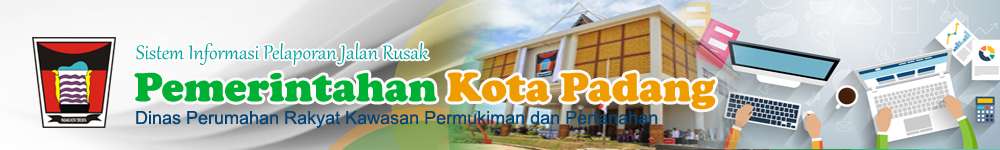
<style>
.page{position:relative;width:1000px;height:150px}
.page>*{position:absolute;margin:0}
.t1{font:24px "Gabriola";color:#00a49d}
.t2{font:42px "CooperBlack";color:#00b034}
.t3{font:42px "CooperBlack";color:#ef9c00}
.t4{font:18px "ArialMT";color:#044476}
</style>
<div class="page">
<p class="t1" style="left:136px;top:43px;width:293px;height:22px">Sistem Informasi Pelaporan Jalan Rusak</p>
<p class="t2" style="left:134px;top:72px;width:582px;height:38px">Pemerintahan <span class="t3">Kota Padang</span></p>
<p class="t4" style="left:136px;top:111px;width:522px;height:17px">Dinas Perumahan Rakyat Kawasan Permukiman dan Pertanahan</p>
</div>
